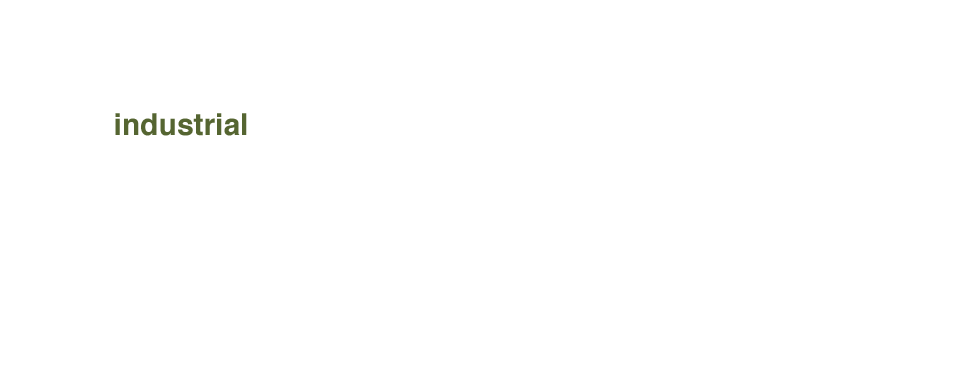
<style>
.page{position:relative;width:980px;height:385px;background:#ffffff}
.page>*{position:absolute;margin:0}
.t1{font:30px "Helvetica-Bold";color:#556531}
</style>
<div class="page">
<p class="t1" style="left:115px;top:113px;width:132px;height:23px">industrial</p>
</div>
